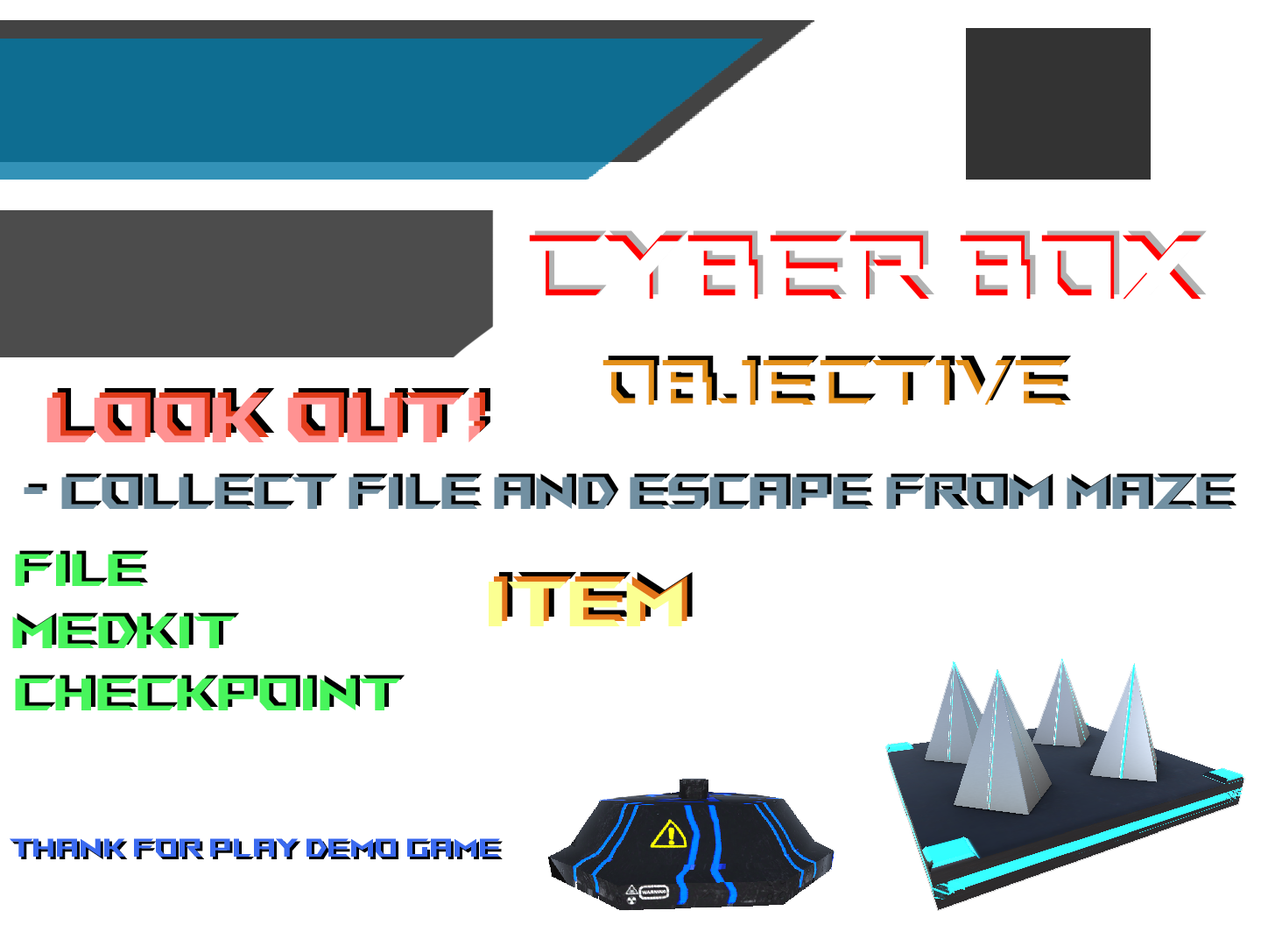
<style>
.page{position:relative;width:1261px;height:946px;background:#ffffff}
.page>*{position:absolute;margin:0}
.t1{font:145.9px "ROGFontsv1.6-Regular"}
.t2{font:145.9px "ROGFontsv1.6-Regular";color:#ffffff}
.t3{font:102.5px "ROGFontsv1.6-Regular";color:#ffffff}
.t4{font:102.5px "ROGFontsv1.6-Regular"}
.t5{font:102.5px "ROGFontsv1.6-Regular";color:#ff9292}
.t6{font:73.1px "ROGFontsv1.6-Regular"}
.t7{font:73.1px "ROGFontsv1.6-Regular";color:#7290a2}
.t8{font:73.1px "ROGFontsv1.6-Regular";color:#48f45c}
.t9{font:102.5px "ROGFontsv1.6-Regular";color:#fbff92}
.t10{font:73.1px "ROGFontsv1.6-Regular";color:#48f55c}
.t11{font:41px "ROGFontsv1.6-Regular";color:#3b6af0}
.t12{font:41px "ROGFontsv1.6-Regular"}
</style>
<div class="page">
<p class="t1" style="left:534px;top:230px;width:673px;height:65px">CYBER BOX</p>
<p class="t2" style="left:525px;top:241px;width:673px;height:65px">CYBER BOX</p>
<p class="t1" style="left:529px;top:235px;width:672px;height:64px">CYBER BOX</p>
<p class="t3" style="left:597px;top:365px;width:463px;height:45px">Objective</p>
<p class="t4" style="left:608px;top:356px;width:463px;height:44px">Objective</p>
<p class="t4" style="left:57px;top:388px;width:433px;height:45px">look out!</p>
<p class="t5" style="left:46px;top:398px;width:434px;height:44px">Look out!</p>
<p class="t4" style="left:52px;top:392px;width:433px;height:45px">look out!</p>
<p class="t6" style="left:28px;top:473px;width:1208px;height:32px">- Collect file and escape from maze</p>
<p class="t7" style="left:24px;top:476px;width:1208px;height:33px">- Collect file and escape from maze</p>
<p class="t8" style="left:15px;top:553px;width:129px;height:33px">File</p>
<p class="t6" style="left:19px;top:550px;width:129px;height:32px">File</p>
<p class="t9" style="left:489px;top:581px;width:193px;height:45px">item</p>
<p class="t4" style="left:494px;top:576px;width:193px;height:45px">item</p>
<p class="t4" style="left:499px;top:572px;width:194px;height:44px">item</p>
<p class="t10" style="left:12px;top:616px;width:223px;height:32px">MedKit</p>
<p class="t6" style="left:17px;top:612px;width:222px;height:32px">MedKit</p>
<p class="t10" style="left:15px;top:678px;width:385px;height:32px">Checkpoint</p>
<p class="t6" style="left:19px;top:674px;width:386px;height:33px">checkpoint</p>
<p class="t11" style="left:10px;top:838px;width:490px;height:18px">Thank for play Demo game</p>
<p class="t12" style="left:12px;top:841px;width:491px;height:18px">Thank for play Demo game</p>
</div>
